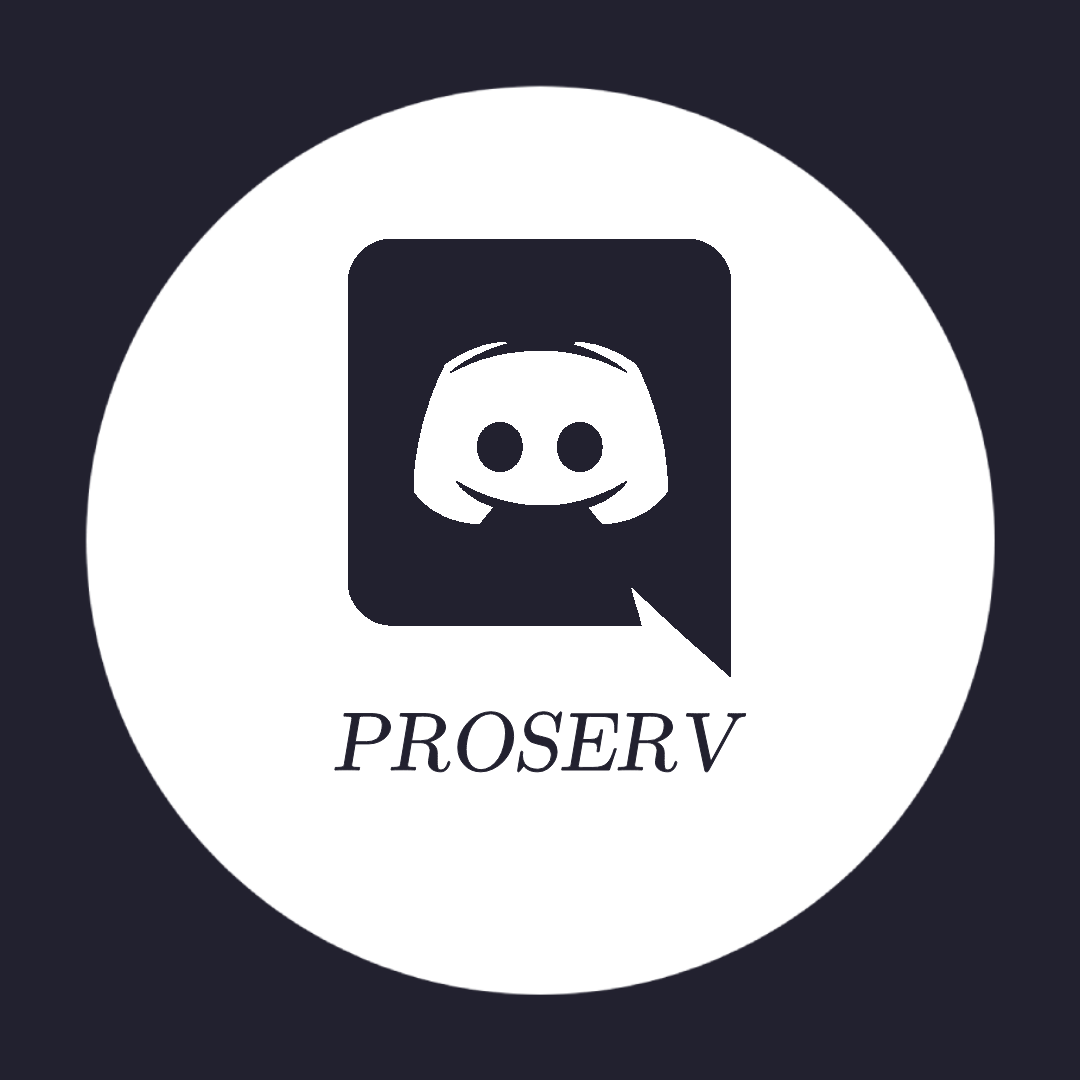
<style>
.page{position:relative;width:1080px;height:1080px;background:#22212f}
.page>*{position:absolute;margin:0}
.t1{font:94px "TibetanSambhotaYigchung";color:#22212f}
</style>
<div class="page">
<p class="t1" style="left:333px;top:710px;width:414px;height:63px">PROSERV</p>
</div>
